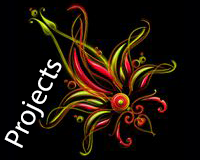
<style>
.page{position:relative;width:200px;height:160px;background:#000000}
.page>*{position:absolute;margin:0}
.t1{font:29px "MyriadPro-Regular";color:#ffffff}
</style>
<div class="page">
<p class="t1" style="left:4px;top:59px;width:58px;height:89px;rotate:-64deg">Projects</p>
</div>
